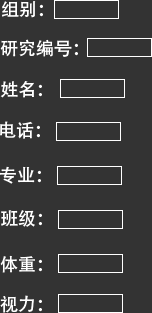
<style>
.page{position:relative;width:152px;height:313px;background:#333333}
.page>*{position:absolute;margin:0}
.t1{font:18px "AdobeHeitiStd-Regular";color:#ffffff}
</style>
<div class="page">
<p class="t1" style="left:2px;top:1px;width:41px;height:17px">组别：</p>
<p class="t1" style="left:0px;top:39px;width:78px;height:18px">研究编号：</p>
<p class="t1" style="left:0px;top:81px;width:42px;height:17px">姓名：</p>
<p class="t1" style="left:0px;top:121px;width:40px;height:18px">电话：</p>
<p class="t1" style="left:0px;top:166px;width:41px;height:18px">专业：</p>
<p class="t1" style="left:1px;top:210px;width:41px;height:17px">班级：</p>
<p class="t1" style="left:0px;top:255px;width:42px;height:18px">体重：</p>
<p class="t1" style="left:0px;top:295px;width:42px;height:18px">视力：</p>
</div>
